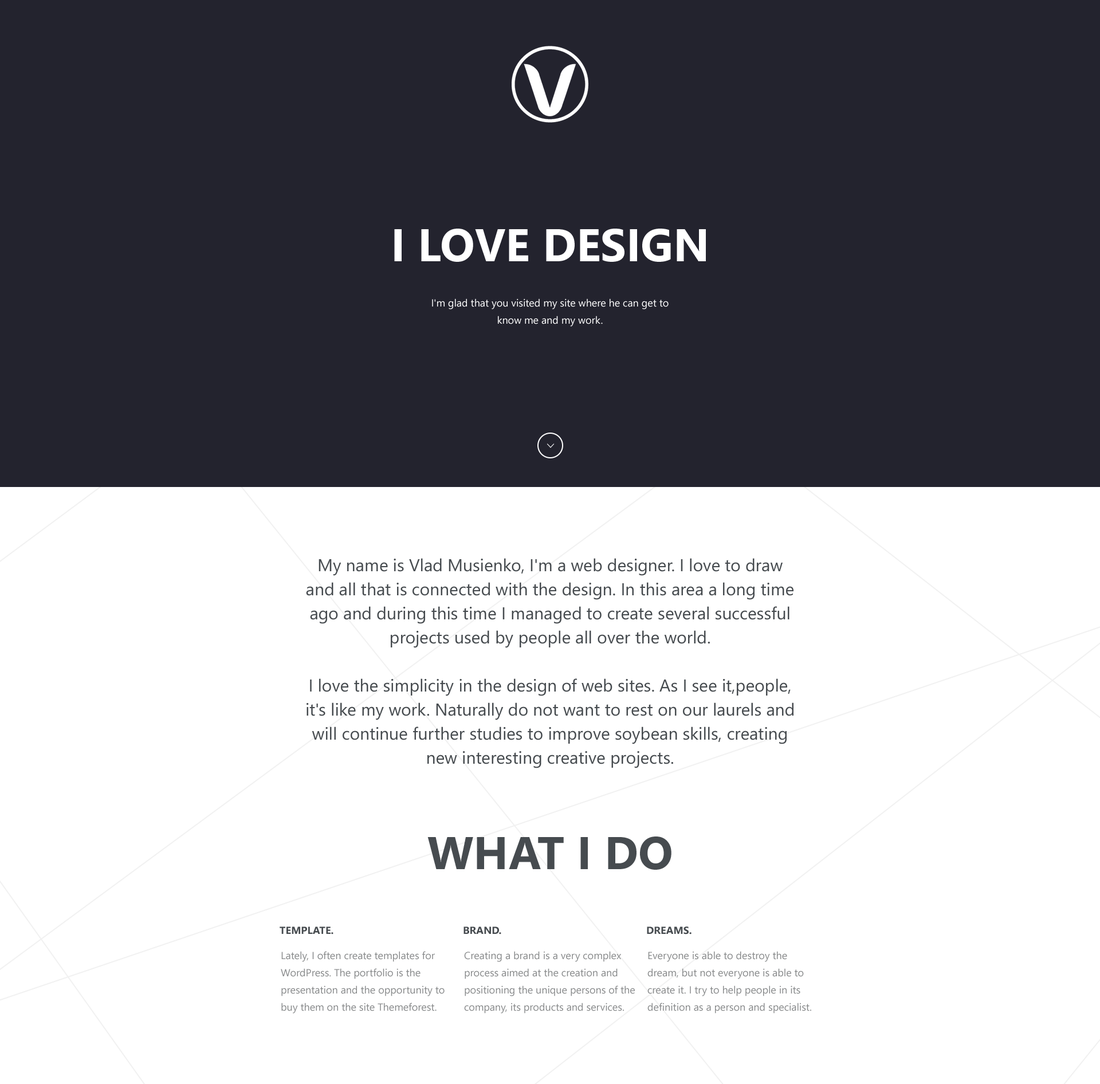
<style>
.page{position:relative;width:1100px;height:1084px;background:#ffffff}
.page>*{position:absolute;margin:0}
.t1{font:45.8px "SegoeUI-Bold";color:#ffffff;text-transform:uppercase}
.t2{font:10.3px/17.2px "SegoeUI";color:#ffffff}
.t3{font:17.2px/24.1px "SegoeUI";color:#464b4f}
.t4{font:45.8px "SegoeUI-Bold";color:#464b4f;text-transform:uppercase}
.t5{font:10.3px "SegoeUI-Bold";color:#464b4f}
.t6{font:10.3px/17.2px "SegoeUI";color:#888a8b}
</style>
<div class="page">
<p class="t1" style="left:394px;top:229px;width:312px;height:33px">i love design</p>
<p class="t2" style="left:432px;top:298px;width:237px;height:29px;text-align:center">I'm glad that you visited my site where he can get to know me and my work.</p>
<p class="t3" style="left:306px;top:558px;width:488px;height:210px;text-align:center">My name is Vlad Musienko, I'm a web designer. I love to draw and all that is connected with the design. In this area a long time ago and during this time I managed to create several successful projects used by people all over the world. <br><br>I love the simplicity in the design of web sites. As I see it,people, it's like my work. Naturally do not want to rest on our laurels and will continue further studies to improve soybean skills, creating new interesting creative projects.</p>
<p class="t4" style="left:427px;top:836px;width:244px;height:34px">what i do</p>
<p class="t5" style="left:280px;top:926px;width:53px;height:8px">TEMPLATE.</p>
<p class="t5" style="left:464px;top:926px;width:37px;height:8px">BRAND.</p>
<p class="t5" style="left:647px;top:926px;width:45px;height:8px">DREAMS.</p>
<p class="t6" style="left:281px;top:951px;width:164px;height:63px">Lately, I often create templates for WordPress. The portfolio is the presentation and the opportunity to buy them on the site Themeforest.</p>
<p class="t6" style="left:464px;top:951px;width:171px;height:63px">Creating a brand is a very complex process aimed at the creation and positioning the unique persons of the company, its products and services.</p>
<p class="t6" style="left:647px;top:951px;width:164px;height:63px">Everyone is able to destroy the dream, but not everyone is able to create it. I try to help people in its definition as a person and specialist.</p>
</div>
